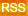
<style>
.page{position:relative;width:28px;height:16px}
.page>*{position:absolute;margin:0}
.t1{font:12px "ArialMT";color:#ffffff}
</style>
<div class="page">
<p class="t1" style="left:2px;top:3px;width:24px;height:9px">RSS</p>
</div>
